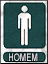
<style>
.page{position:relative;width:48px;height:64px}
.page>*{position:absolute;margin:0}
.t1{font:10.3px "ArialMT";color:#efe7ef;scale:0.75 1}
</style>
<div class="page">
<p class="t1" style="left:9px;top:53px;width:29px;height:8px">HOMEM</p>
</div>
